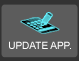
<style>
.page{position:relative;width:79px;height:61px;background:#5c5c5c}
.page>*{position:absolute;margin:0}
.t1{font:10px "ArialMT";color:#ffffff}
</style>
<div class="page">
<p class="t1" style="left:9px;top:41px;width:62px;height:8px">UPDATE APP.</p>
</div>
